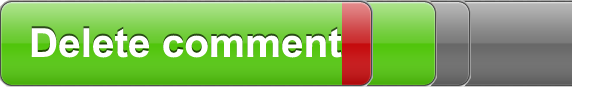
<style>
.page{position:relative;width:603px;height:87px}
.page>*{position:absolute;margin:0}
.t1{font:39.7px "Arial-BoldMT";color:#ffffff}
</style>
<div class="page">
<p class="t1" style="left:31px;top:28px;width:311px;height:30px">Delete comment</p>
</div>
